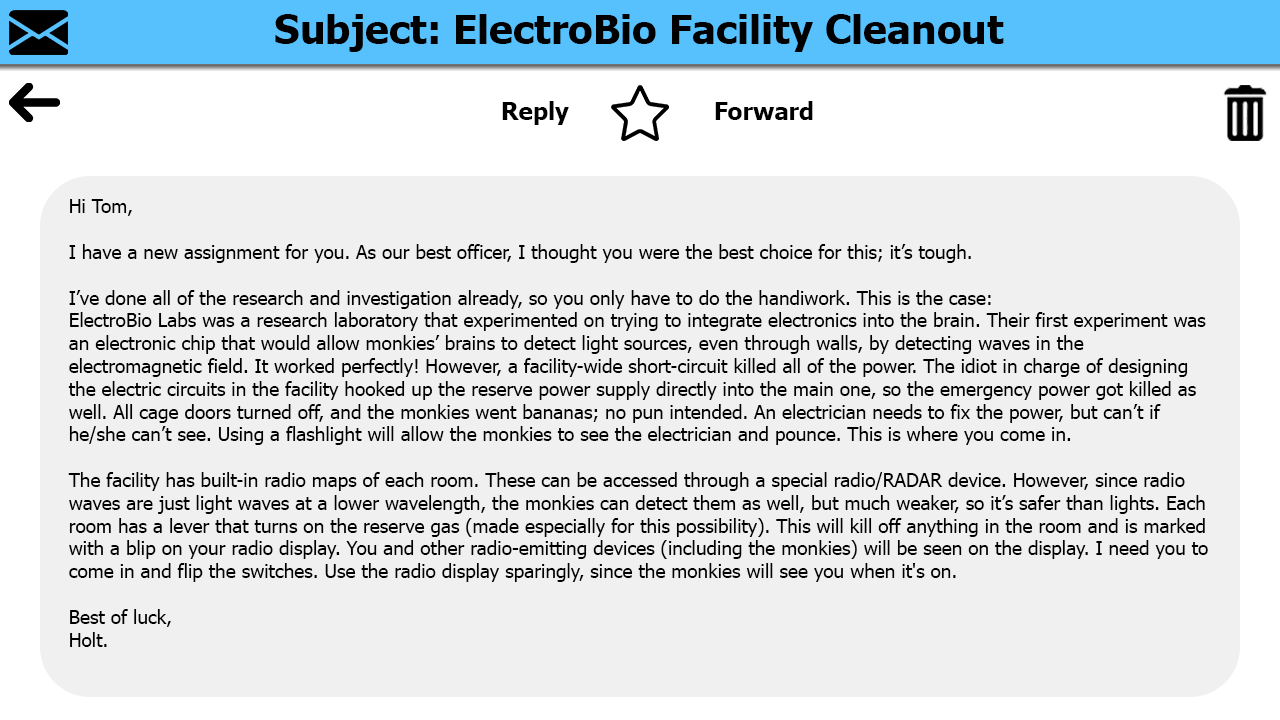
<style>
.page{position:relative;width:1280px;height:720px;background:#f0f0f0}
.page>*{position:absolute;margin:0}
.t1{font:40px "Tahoma-Bold";color:#000000}
.t2{font:24px "Tahoma-Bold";color:#000000}
.t3{font:19px "Tahoma";color:#000000}
</style>
<div class="page">
<p class="t1" style="left:275px;top:14px;width:729px;height:38px">Subject: ElectroBio Facility Cleanout</p>
<p class="t2" style="left:502px;top:101px;width:67px;height:24px">Reply</p>
<p class="t2" style="left:715px;top:101px;width:98px;height:19px">Forward</p>
<p class="t3" style="left:68px;top:199px;width:1140px;height:448px">Hi Tom,<br><br>I have a new assignment for you. As our best officer, I thought you were the best choice for this; it’s tough.<br><br>I’ve done all of the research and investigation already, so you only have to do the handiwork. This is the case:<br>ElectroBio Labs was a research laboratory that experimented on trying to integrate electronics into the brain. Their first experiment was an electronic chip that would allow monkies’ brains to detect light sources, even through walls, by detecting waves in the electromagnetic field. It worked perfectly! However, a facility-wide short-circuit killed all of the power. The idiot in charge of designing the electric circuits in the facility hooked up the reserve power supply directly into the main one, so the emergency power got killed as well. All cage doors turned off, and the monkies went bananas; no pun intended. An electrician needs to fix the power, but can’t if he/she can’t see. Using a flashlight will allow the monkies to see the electrician and pounce. This is where you come in.<br><br>The facility has built-in radio maps of each room. These can be accessed through a special radio/RADAR device. However, since radio waves are just light waves at a lower wavelength, the monkies can detect them as well, but much weaker, so it’s safer than lights. Each room has a lever that turns on the reserve gas (made especially for this possibility). This will kill off anything in the room and is marked with a blip on your radio display. You and other radio-emitting devices (including the monkies) will be seen on the display. I need you to come in and flip the switches. Use the radio display sparingly, since the monkies will see you when it's on.<br><br>Best of luck,<br>Holt.</p>
</div>
